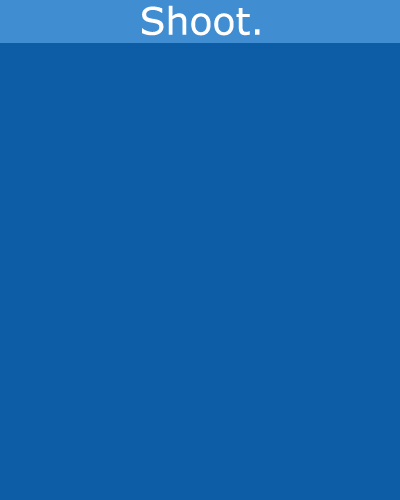
<style>
.page{position:relative;width:400px;height:500px;background:#0c5da5}
.page>*{position:absolute;margin:0}
.t1{font:37.9px "Verdana";color:#ffffff}
</style>
<div class="page">
<p class="t1" style="left:142px;top:5px;width:118px;height:31px">Shoot.</p>
</div>
